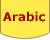
<style>
.page{position:relative;width:50px;height:40px;background:#ffec4c}
.page>*{position:absolute;margin:0}
.t1{font:12px "Verdana-Bold";color:#a00801}
</style>
<div class="page">
<p class="t1" style="left:3px;top:11px;width:42px;height:11px">Arabic</p>
</div>
